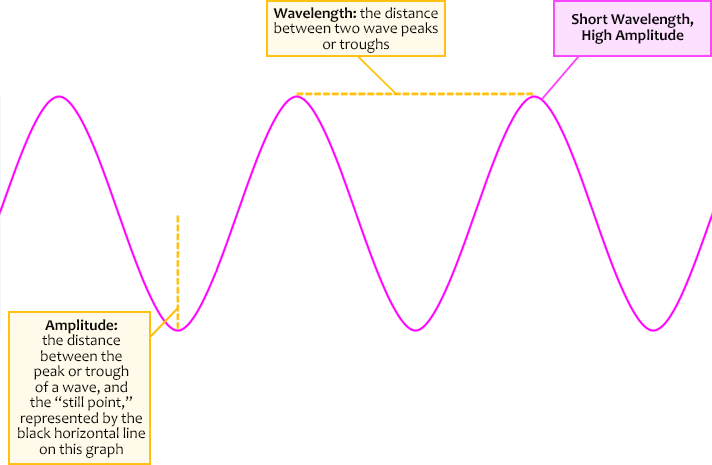
<style>
.page{position:relative;width:712px;height:465px;background:#ffffff}
.page>*{position:absolute;margin:0}
.t1{font:15.6px/15.6px "Candara";letter-spacing:-0.01em;color:#0c0c0b}
.t2{font:15.6px/15.6px "Candara-Bold";letter-spacing:-0.01em;color:#0c0c0b}
</style>
<div class="page">
<p class="t1" style="left:273px;top:7px;width:165px;height:46px;text-align:center"><span class="t2">Wavelength: </span>the distance<br>between two wave peaks<br>or troughs</p>
<p class="t2" style="left:571px;top:13px;width:123px;height:31px;text-align:center">Short Wavelength,<br>High Amplitude</p>
<p class="t1" style="left:18px;top:319px;width:127px;height:139px;text-align:center"><span class="t2">Amplitude:<br></span>the distance<br>between the<br>peak or trough<br>of a wave, and<br>the “still point,”<br>represented by the<br>black horizontal line<br>on this graph</p>
</div>
